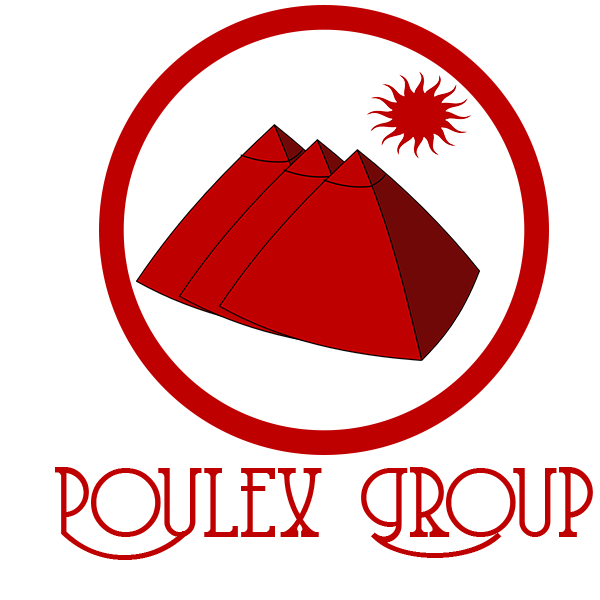
<style>
.page{position:relative;width:600px;height:600px;background:#ffffff}
.page>*{position:absolute;margin:0}
.t1{font:98.8px "CoventryGarden";color:#bf0000}
</style>
<div class="page">
<p class="t1" style="left:55px;top:467px;width:538px;height:93px">Poulex Group</p>
</div>
